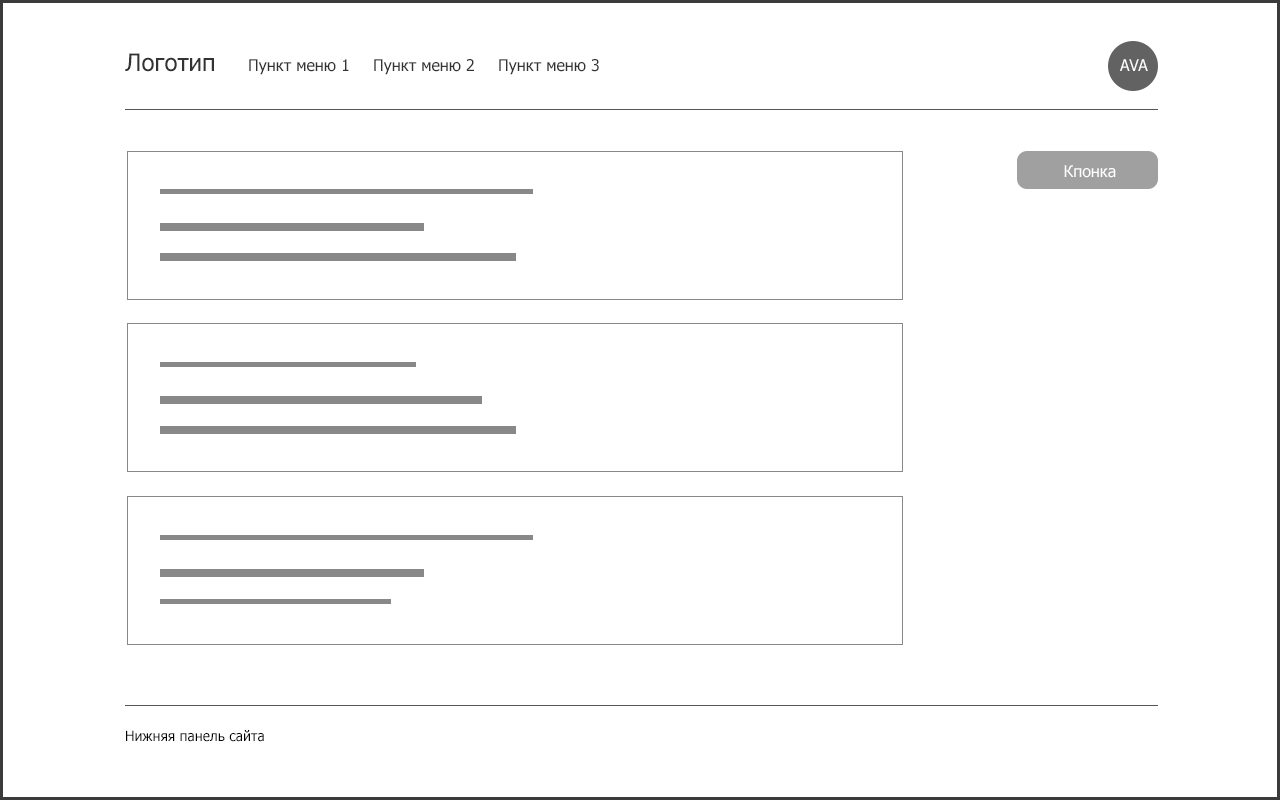
<style>
.page{position:relative;width:1280px;height:800px;background:#ffffff}
.page>*{position:absolute;margin:0}
.t1{font:24px "Tahoma";color:#333333}
.t2{font:16px "Tahoma";color:#333333}
.t3{font:16px "Tahoma";color:#ffffff}
.t4{font:14px "Tahoma";color:#000000}
</style>
<div class="page">
<p class="t1" style="left:125px;top:53px;width:89px;height:19px">Логотип</p>
<p class="t2" style="left:249px;top:59px;width:100px;height:16px">Пункт меню 1</p>
<p class="t2" style="left:374px;top:59px;width:100px;height:16px">Пункт меню 2</p>
<p class="t2" style="left:499px;top:59px;width:100px;height:16px">Пункт меню 3</p>
<p class="t3" style="left:1120px;top:59px;width:28px;height:12px">AVA</p>
<p class="t3" style="left:1064px;top:165px;width:52px;height:13px">Кпонка</p>
<p class="t4" style="left:126px;top:730px;width:138px;height:12px">Нижняя панель сайта</p>
</div>
